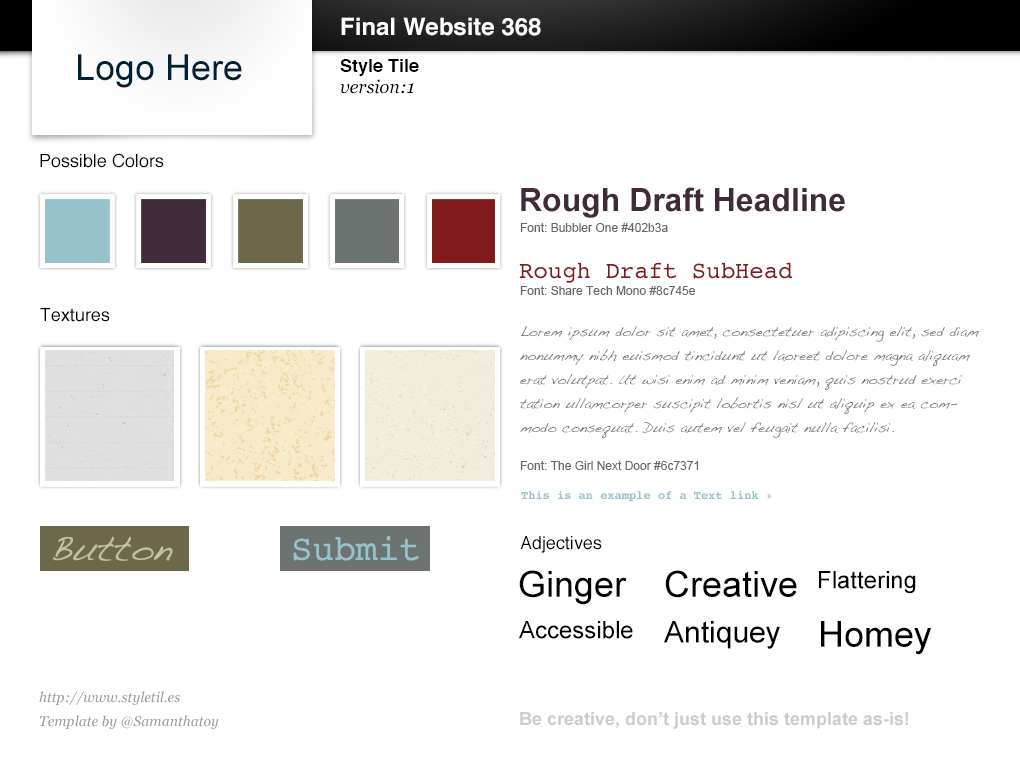
<style>
.page{position:relative;width:1020px;height:760px;background:#ffffff}
.page>*{position:absolute;margin:0}
.t1{font:24px "Helvetica-Bold";color:#ffffff}
.t2{font:36px "ArialMT";color:#002035}
.t3{font:18px "Helvetica-Bold";color:#000000}
.t4{font:18px "Georgia-Italic";color:#000000}
.t5{font:18px "Helvetica";color:#000000}
.t6{font:32px "Arial-BoldMT";color:#402b3a}
.t7{font:12px "ArialMT";color:#666666}
.t8{font:24px "Courier";color:#801c1c}
.t9{font:14px/24px "Handwriting-Dakota";color:#6c7371}
.t10{font:12px "Courier-Bold";color:#97c2cc}
.t11{font:36px "Handwriting-Dakota";color:#bec49a}
.t12{font:36px "Courier";color:#97c2cc}
.t13{font:36px "ArialMT";color:#000000}
.t14{font:24px "ArialMT";color:#000000}
.t15{font:30px "ArialMT";color:#000000}
.t16{font:14px/24px "Georgia-Italic";color:#999999}
.t17{font:18px "Arial-BoldMT";color:#cccccc}
</style>
<div class="page">
<p class="t1" style="left:341px;top:17px;width:200px;height:19px">Final Website 368</p>
<p class="t2" style="left:78px;top:54px;width:164px;height:34px">Logo Here</p>
<p class="t3" style="left:340px;top:59px;width:79px;height:17px">Style Tile</p>
<p class="t4" style="left:340px;top:79px;width:74px;height:15px">version:1</p>
<p class="t5" style="left:40px;top:153px;width:124px;height:15px">Possible Colors</p>
<p class="t6" style="left:521px;top:187px;width:324px;height:31px">Rough Draft Headline</p>
<p class="t7" style="left:520px;top:223px;width:148px;height:9px">Font: Bubbler One #402b3a</p>
<p class="t8" style="left:519px;top:262px;width:273px;height:21px">Rough Draft SubHead</p>
<p class="t7" style="left:520px;top:286px;width:175px;height:9px">Font: Share Tech Mono #8c745e</p>
<p class="t5" style="left:40px;top:308px;width:70px;height:14px">Textures</p>
<p class="t9" style="left:520px;top:326px;width:459px;height:112px">Lorem ipsum dolor sit amet, consectetuer adipiscing elit, sed diam nonummy nibh euismod tincidunt ut laoreet dolore magna aliquam erat volutpat. Ut wisi enim ad minim veniam, quis nostrud exerci tation ullamcorper suscipit lobortis nisl ut aliquip ex ea commodo consequat. Duis autem vel feugait nulla facilisi.</p>
<p class="t7" style="left:520px;top:461px;width:179px;height:9px">Font: The Girl Next Door #6c7371</p>
<p class="t10" style="left:521px;top:491px;width:250px;height:11px">This is an example of a Text link »</p>
<p class="t11" style="left:53px;top:536px;width:120px;height:25px">Button</p>
<p class="t12" style="left:293px;top:536px;width:126px;height:25px">Submit</p>
<p class="t5" style="left:520px;top:536px;width:82px;height:17px">Adjectives</p>
<p class="t13" style="left:519px;top:570px;width:108px;height:35px">Ginger</p>
<p class="t13" style="left:665px;top:570px;width:132px;height:28px">Creative</p>
<p class="t14" style="left:819px;top:571px;width:97px;height:23px">Flattering</p>
<p class="t14" style="left:519px;top:621px;width:114px;height:18px">Accessible</p>
<p class="t15" style="left:664px;top:621px;width:116px;height:28px">Antiquey</p>
<p class="t13" style="left:821px;top:621px;width:111px;height:34px">Homey</p>
<p class="t16" style="left:39px;top:691px;width:180px;height:38px">http://www.styletil.es<br>Template by @Samanthatoy</p>
<p class="t17" style="left:520px;top:712px;width:388px;height:17px">Be creative, don’t just use this template as-is!</p>
</div>
